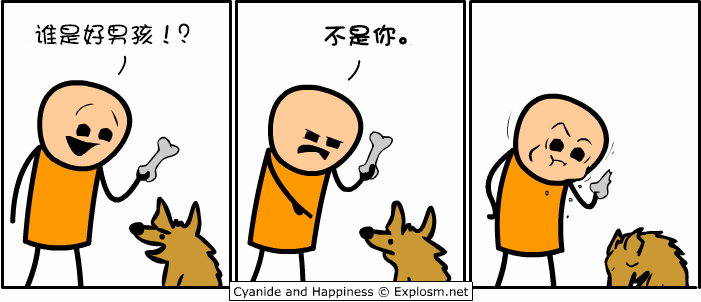
<style>
.page{position:relative;width:701px;height:302px;background:#fefefe}
.page>*{position:absolute;margin:0}
.t1{font:24px "DFShaoNvW5";color:#000000}
.t2{font:24px "DFShaoNvW5";color:#000000;font-weight:bold}
</style>
<div class="page">
<p class="t1" style="left:35px;top:23px;width:155px;height:22px">谁是好男孩！？</p>
<p class="t2" style="left:324px;top:24px;width:83px;height:23px">不是你。</p>
</div>
